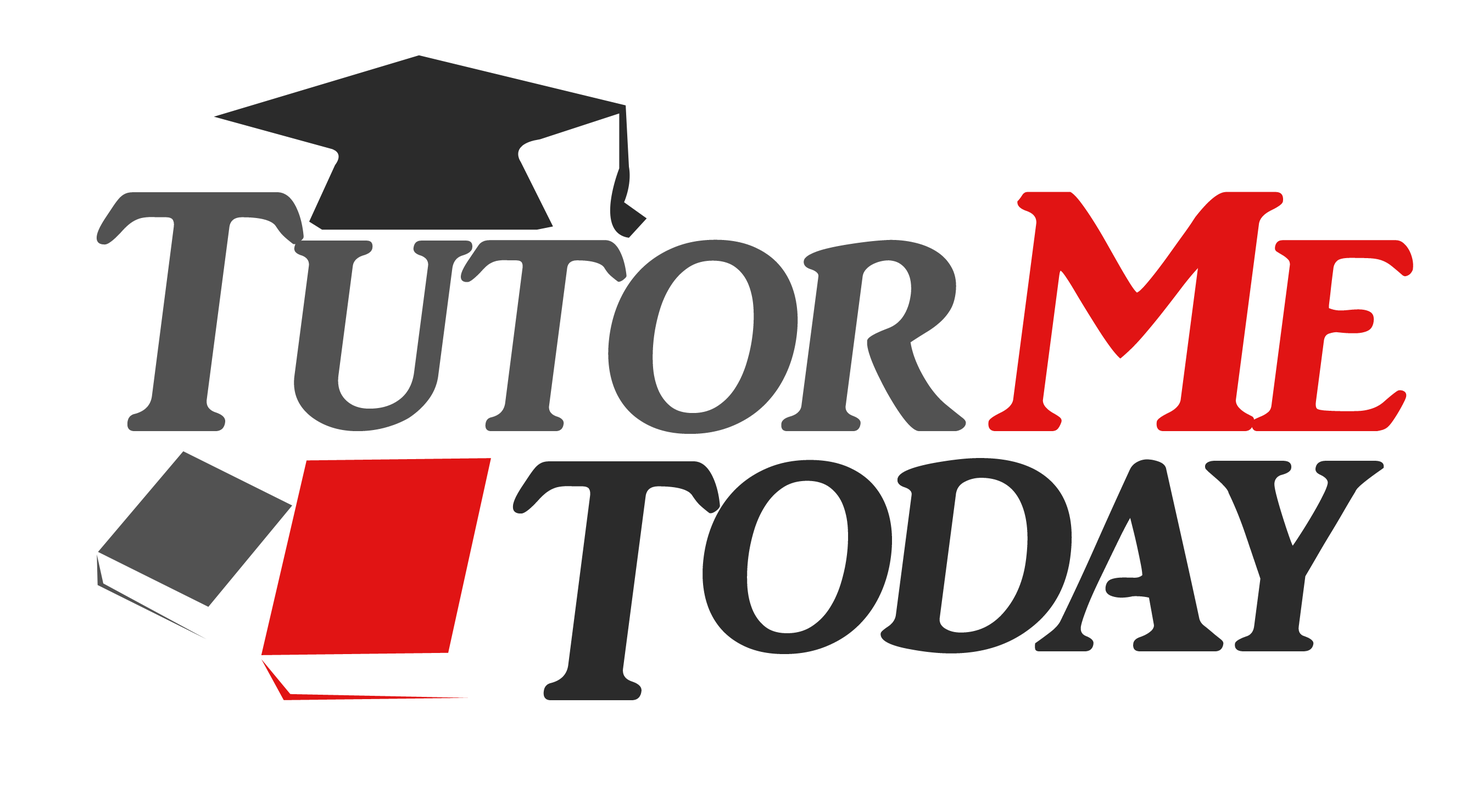
<style>
.page{position:relative;width:1483px;height:804px;background:#ffffff}
.page>*{position:absolute;margin:0}
.t1{font:355.7px "ARJULIAN";letter-spacing:-0.04em;color:#525252}
.t2{font:355.7px "ARJULIAN";letter-spacing:-0.04em;color:#e11414}
.t3{font:355.7px "ARJULIAN";letter-spacing:-0.04em;color:#2b2b2b}
</style>
<div class="page">
<p class="t1" style="left:97px;top:192px;width:1316px;height:242px">Tutor<span class="t2">Me</span></p>
<p class="t3" style="left:512px;top:458px;width:872px;height:242px">Today</p>
</div>
